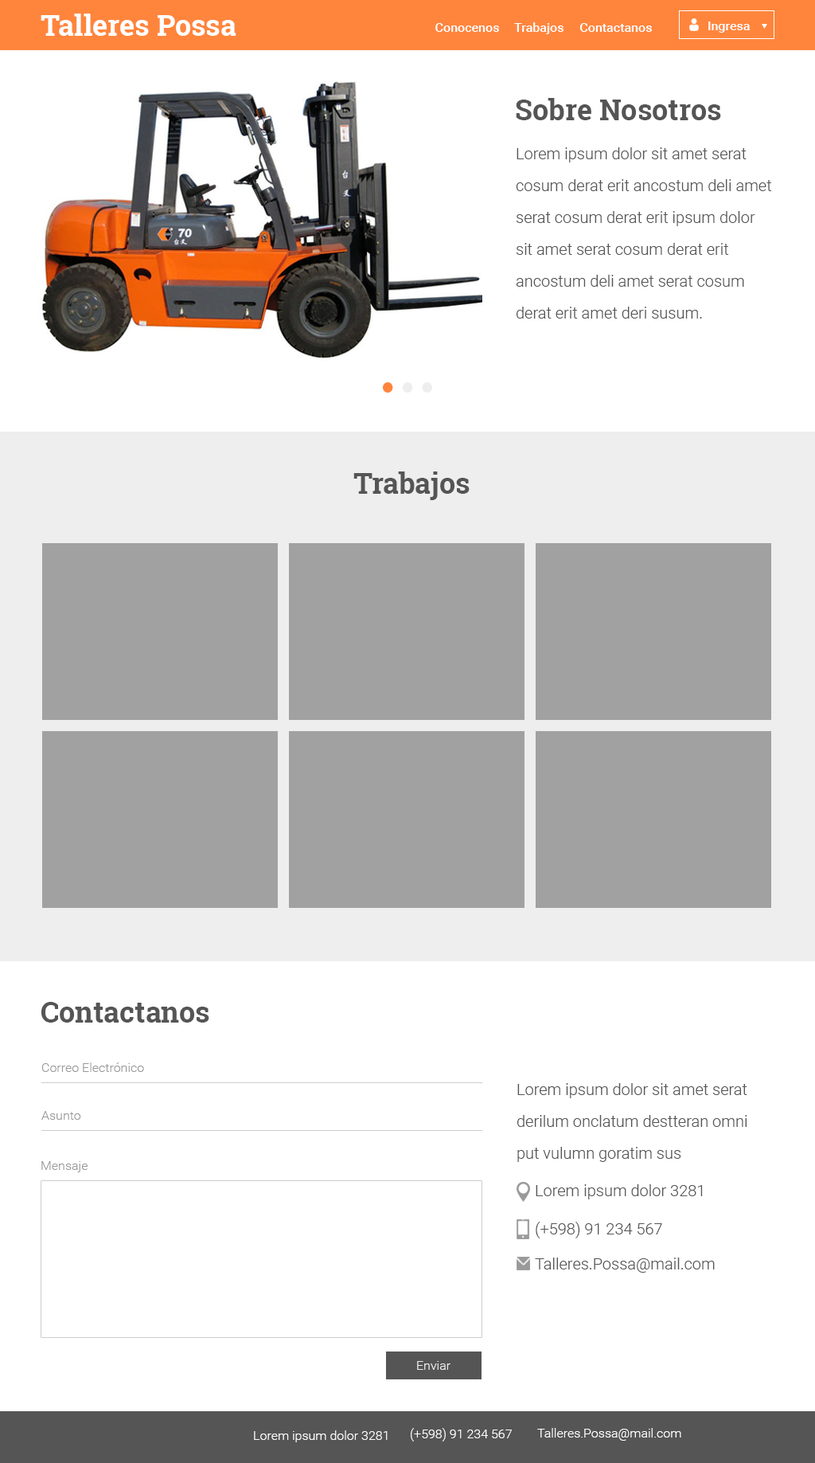
<style>
.page{position:relative;width:815px;height:1463px;background:#ffffff}
.page>*{position:absolute;margin:0}
.t1{font:28.7px "RobotoSlab-Bold";color:#ffffff}
.t2{font:12.7px "Roboto-Medium";color:#ffffff}
.t3{font:28.7px "RobotoSlab-Bold";color:#555555}
.t4{font:15.9px/31.8px "Roboto-Light";color:#555555}
.t5{font:12.7px "Roboto-Light";color:#999999}
.t6{font:15.9px "Roboto-Light";color:#555555}
.t7{font:12.7px "Roboto-Light";color:#eeeeee}
.t8{font:12.7px "Roboto-Light";color:#ffffff}
</style>
<div class="page">
<p class="t1" style="left:41px;top:14px;width:195px;height:22px">Talleres Possa</p>
<p class="t2" style="left:436px;top:23px;width:63px;height:9px">Conocenos</p>
<p class="t2" style="left:514px;top:22px;width:50px;height:12px">Trabajos</p>
<p class="t2" style="left:580px;top:23px;width:72px;height:9px">Contactanos</p>
<p class="t2" style="left:709px;top:21px;width:41px;height:12px">Ingresa</p>
<p class="t3" style="left:516px;top:98px;width:205px;height:22px">Sobre Nosotros</p>
<p class="t4" style="left:516px;top:147px;width:256px;height:171px;text-align:right">Lorem ipsum dolor sit amet serat cosum derat erit ancostum deli amet serat cosum derat erit ipsum dolor sit amet serat cosum derat erit ancostum deli amet serat cosum derat erit amet deri susum.</p>
<p class="t3" style="left:354px;top:471px;width:116px;height:29px">Trabajos</p>
<p class="t3" style="left:41px;top:1002px;width:168px;height:20px">Contactanos</p>
<p class="t5" style="left:41px;top:1062px;width:103px;height:10px">Correo Electrónico</p>
<p class="t4" style="left:517px;top:1083px;width:231px;height:79px;text-align:right">Lorem ipsum dolor sit amet serat derilum onclatum destteran omni put vulumn goratim sus</p>
<p class="t5" style="left:41px;top:1111px;width:40px;height:8px">Asunto</p>
<p class="t5" style="left:41px;top:1161px;width:47px;height:11px">Mensaje</p>
<p class="t6" style="left:536px;top:1184px;width:167px;height:15px">Lorem ipsum dolor 3281</p>
<p class="t6" style="left:536px;top:1221px;width:126px;height:17px">(+598) 91 234 567</p>
<p class="t6" style="left:535px;top:1257px;width:180px;height:15px">Talleres.Possa@mail.com</p>
<p class="t7" style="left:417px;top:1361px;width:34px;height:8px">Enviar</p>
<p class="t8" style="left:254px;top:1430px;width:134px;height:12px">Lorem ipsum dolor 3281</p>
<p class="t8" style="left:411px;top:1428px;width:101px;height:13px">(+598) 91 234 567</p>
<p class="t8" style="left:537px;top:1428px;width:145px;height:12px">Talleres.Possa@mail.com</p>
</div>
